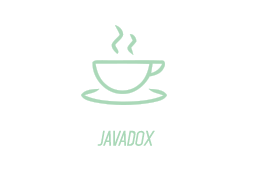
<style>
.page{position:relative;width:255px;height:194px;background:#ffffff}
.page>*{position:absolute;margin:0}
.t1{font:18px "Mohave-SemiBoldItalic";color:#aad8b8}
</style>
<div class="page">
<p class="t1" style="left:97px;top:130px;width:58px;height:16px">JAVADOX</p>
</div>
